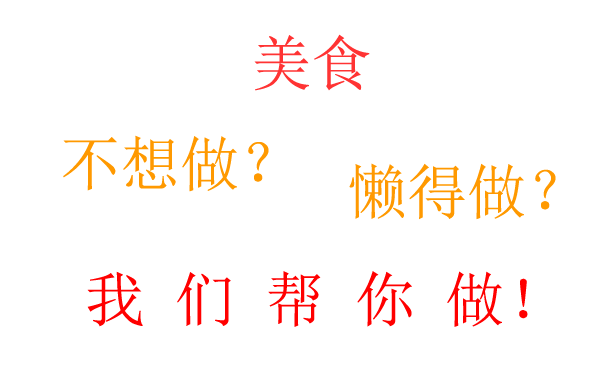
<style>
.page{position:relative;width:600px;height:366px;background:#ffffff}
.page>*{position:absolute;margin:0}
.t1{font:60px "SimSun";color:#ff3333}
.t2{font:60px "SimSun";color:#ff9900}
.t3{font:60px "SimSun";color:#ff0000}
</style>
<div class="page">
<p class="t1" style="left:254px;top:34px;width:116px;height:57px">美食</p>
<p class="t2" style="left:63px;top:135px;width:206px;height:57px">不想做？</p>
<p class="t2" style="left:349px;top:163px;width:207px;height:57px">懒得做？</p>
<p class="t3" style="left:87px;top:271px;width:441px;height:56px">我 们 帮 你 做！</p>
</div>
